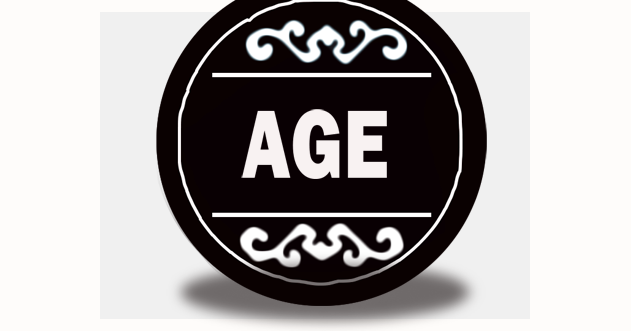
<style>
.page{position:relative;width:631px;height:331px;background:#fefcfa}
.page>*{position:absolute;margin:0}
.t1{font:99.7px "FranklinGothic-Heavy";color:#f8f2f2;scale:0.77 1}
</style>
<div class="page">
<p class="t1" style="left:241px;top:109px;width:146px;height:70px">AGE</p>
</div>
